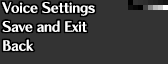
<style>
.page{position:relative;width:168px;height:64px;background:#333333}
.page>*{position:absolute;margin:0}
.t1{font:14px/19px "ChiaroStd-B";letter-spacing:-0.015em;color:#ffffff}
</style>
<div class="page">
<p class="t1" style="left:2px;top:2px;width:93px;height:49px">Voice Settings<br>Save and Exit<br>Back</p>
</div>
